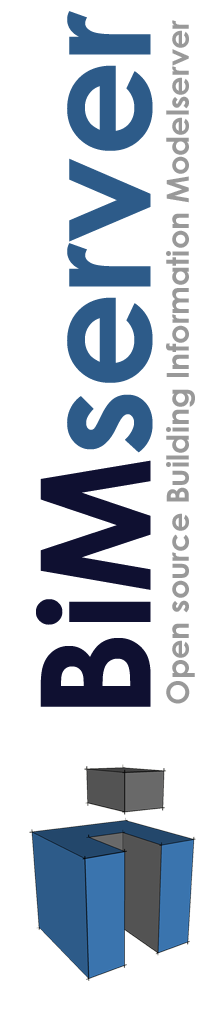
<style>
.page{position:relative;width:212px;height:1018px;background:#ffffff}
.page>*{position:absolute;margin:0}
.t1{font:152.8px "CenturyGothic-Bold";color:#2d5b89}
.t2{font:152.8px "CenturyGothic-Bold";color:#0f1031}
.t3{font:30.6px "CenturyGothic-Bold";color:#999999}
</style>
<div class="page">
<p class="t1" style="left:36px;top:11px;width:117px;height:696px;rotate:-90deg"><span class="t2">BiM</span>server</p>
<p class="t3" style="left:166px;top:20px;width:29px;height:684px;rotate:-90deg">Open source Building Information Modelserver</p>
</div>
